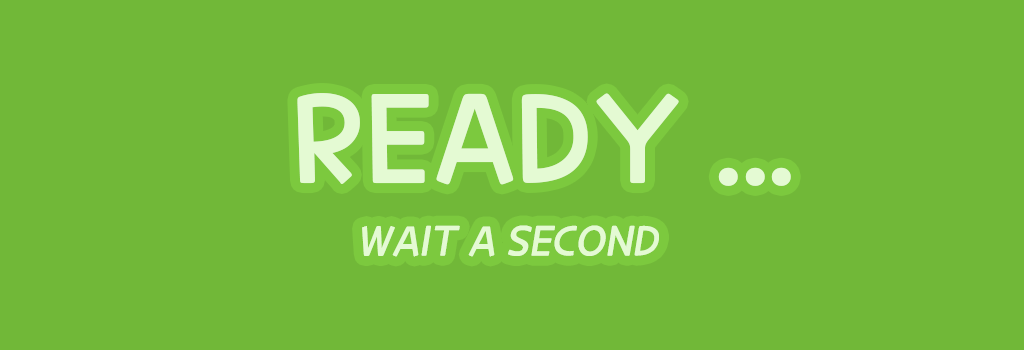
<style>
.page{position:relative;width:1024px;height:350px;background:#71b838}
.page>*{position:absolute;margin:0}
.t1{font:117.1px "CookieRun-Regular";color:#e4fad3}
.t2{font:39.3px "CookieRun-Regular";color:#e4fad3;font-style:italic}
</style>
<div class="page">
<p class="t1" style="left:297px;top:93px;width:494px;height:93px">READY ...</p>
<p class="t2" style="left:362px;top:225px;width:297px;height:32px">WAIT A SECOND</p>
</div>
